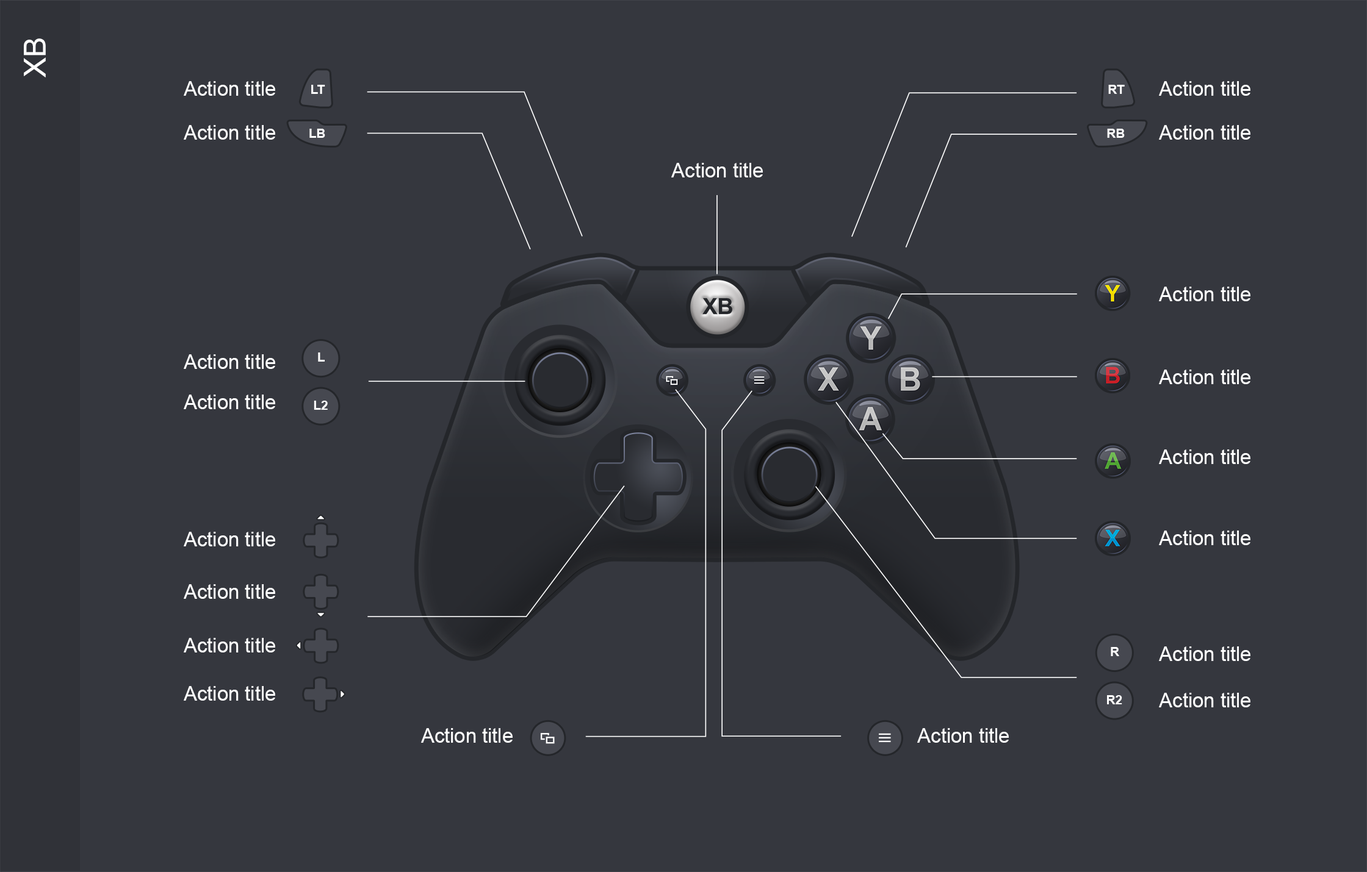
<style>
.page{position:relative;width:1367px;height:872px;background:#35373e}
.page>*{position:absolute;margin:0}
.t1{font:30.5px "ArialMT";color:#ffffff}
.t2{font:20px "ArialMT";color:#ffffff}
.t3{font:12.7px "Arial-BoldMT";color:#ffffff}
.t4{font:12.6px "Arial-BoldMT";color:#ffffff}
.t5{font:12.8px "Arial-BoldMT";color:#ffffff}
</style>
<div class="page">
<p class="t1" style="left:24px;top:38px;width:22px;height:39px;rotate:-90deg">XB</p>
<p class="t2" style="left:184px;top:81px;width:91px;height:15px">Action title</p>
<p class="t3" style="left:311px;top:85px;width:14px;height:9px">LT</p>
<p class="t3" style="left:1108px;top:85px;width:16px;height:9px">RT</p>
<p class="t2" style="left:1159px;top:81px;width:91px;height:15px">Action title</p>
<p class="t2" style="left:184px;top:125px;width:91px;height:15px">Action title</p>
<p class="t2" style="left:1159px;top:125px;width:91px;height:15px">Action title</p>
<p class="t4" style="left:309px;top:129px;width:16px;height:9px">LB</p>
<p class="t4" style="left:1107px;top:129px;width:17px;height:9px">RB</p>
<p class="t2" style="left:671px;top:163px;width:92px;height:15px">Action title</p>
<p class="t2" style="left:1159px;top:287px;width:91px;height:14px">Action title</p>
<p class="t5" style="left:318px;top:353px;width:7px;height:9px">L</p>
<p class="t2" style="left:184px;top:354px;width:91px;height:15px">Action title</p>
<p class="t2" style="left:1159px;top:370px;width:91px;height:14px">Action title</p>
<p class="t2" style="left:184px;top:395px;width:91px;height:14px">Action title</p>
<p class="t5" style="left:314px;top:401px;width:14px;height:9px">L2</p>
<p class="t2" style="left:1159px;top:450px;width:91px;height:14px">Action title</p>
<p class="t2" style="left:184px;top:532px;width:91px;height:15px">Action title</p>
<p class="t2" style="left:1159px;top:531px;width:91px;height:14px">Action title</p>
<p class="t2" style="left:184px;top:585px;width:91px;height:14px">Action title</p>
<p class="t2" style="left:184px;top:638px;width:91px;height:15px">Action title</p>
<p class="t5" style="left:1110px;top:647px;width:9px;height:10px">R</p>
<p class="t2" style="left:1159px;top:647px;width:91px;height:14px">Action title</p>
<p class="t2" style="left:184px;top:686px;width:91px;height:15px">Action title</p>
<p class="t5" style="left:1107px;top:696px;width:15px;height:9px">R2</p>
<p class="t2" style="left:1159px;top:693px;width:91px;height:15px">Action title</p>
<p class="t2" style="left:421px;top:728px;width:92px;height:15px">Action title</p>
<p class="t2" style="left:917px;top:728px;width:92px;height:15px">Action title</p>
</div>
